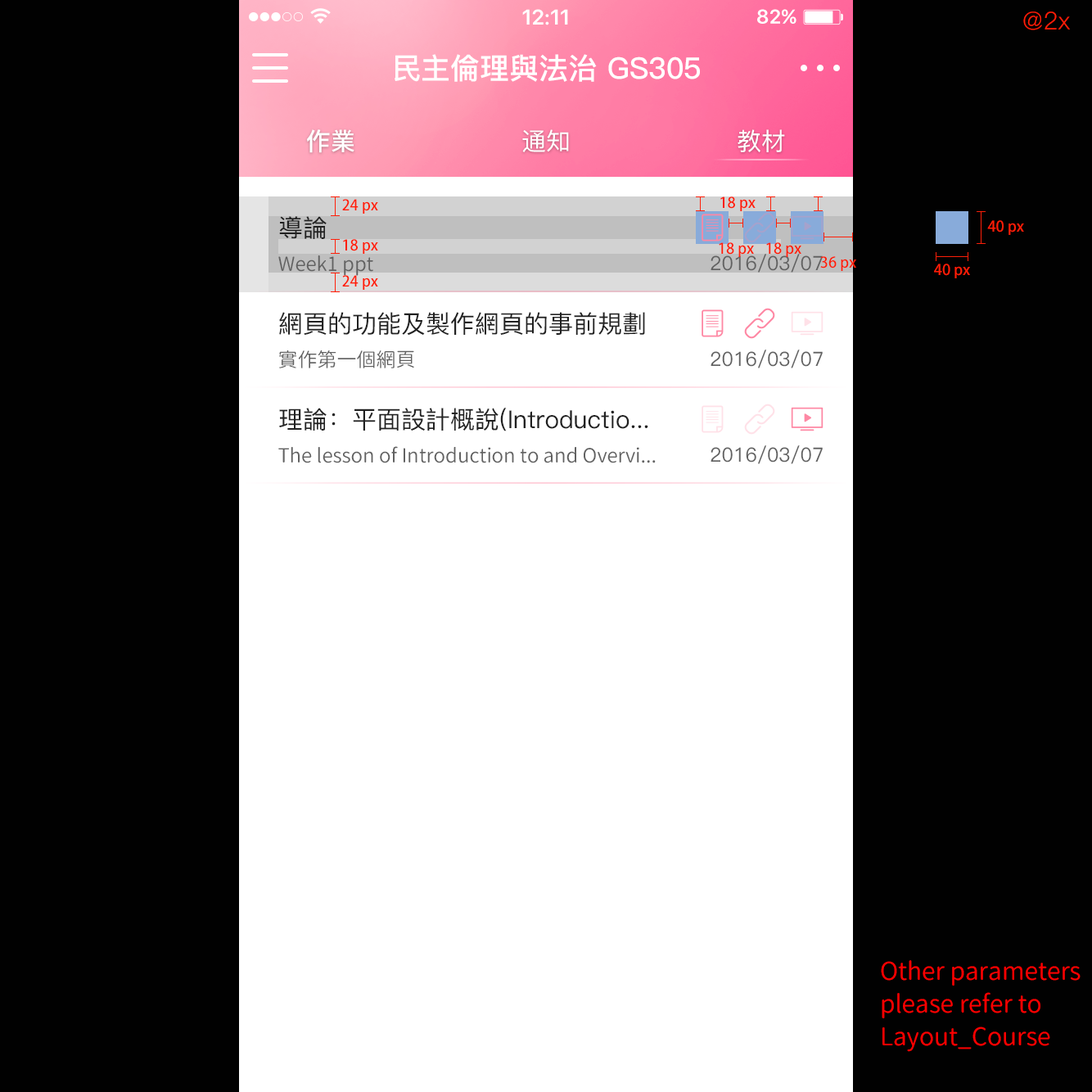
<style>
.page{position:relative;width:1092px;height:1092px;background:#010101}
.page>*{position:absolute;margin:0}
.t1{font:21.3px "SFUIDisplay-Semibold";color:#ffffff}
.t2{font:19.6px "SFUIDisplay-Semibold";letter-spacing:0.025em;color:#ffffff}
.t3{font:24.6px "PingFang-SC-Regular";color:#ff1e07}
.t4{font:29.5px "PingFang-SC-Bold";color:#ffffff}
.t5{font:24.6px "PingFang-SC-Bold";color:#ffffff}
.t6{font:24.6px "PingFang-SC-Medium";color:#ffffff}
.t7{font:14.7px "AdobeFanHeitiStd-Bold";color:#ff1e07}
.t8{font:24.6px "PingFang-SC-Medium";color:#212121}
.t9{font:19.6px "GenJyuuGothic-Normal";color:#616161}
.t10{font:19.6px "PingFang-SC-Medium";color:#616161}
.t11{font:24.6px/32.7px "GenJyuuGothic-Normal";color:#ff0000}
</style>
<div class="page">
<p class="t1" style="left:522px;top:9px;width:46px;height:16px">12:11</p>
<p class="t2" style="left:757px;top:9px;width:39px;height:15px">82%</p>
<p class="t3" style="left:1023px;top:11px;width:47px;height:19px">@2x</p>
<p class="t4" style="left:395px;top:54px;width:305px;height:28px">民主倫理與法治 GS305</p>
<p class="t5" style="left:307px;top:129px;width:47px;height:24px">作業</p>
<p class="t6" style="left:522px;top:129px;width:47px;height:23px">通知</p>
<p class="t6" style="left:738px;top:129px;width:47px;height:23px">教材</p>
<p class="t7" style="left:720px;top:196px;width:36px;height:15px">18 px</p>
<p class="t7" style="left:342px;top:199px;width:36px;height:15px">24 px</p>
<p class="t8" style="left:279px;top:216px;width:48px;height:23px">導論</p>
<p class="t7" style="left:987px;top:220px;width:37px;height:15px">40 px</p>
<p class="t7" style="left:343px;top:239px;width:35px;height:15px">18 px</p>
<p class="t7" style="left:719px;top:242px;width:35px;height:15px">18 px</p>
<p class="t7" style="left:766px;top:242px;width:35px;height:15px">18 px</p>
<p class="t9" style="left:278px;top:255px;width:95px;height:21px">Week1 ppt</p>
<p class="t10" style="left:711px;top:254px;width:112px;height:19px">2016/03/07</p>
<p class="t7" style="left:820px;top:256px;width:36px;height:15px">36 px</p>
<p class="t7" style="left:934px;top:264px;width:36px;height:14px">40 px</p>
<p class="t7" style="left:342px;top:275px;width:36px;height:15px">24 px</p>
<p class="t8" style="left:279px;top:312px;width:366px;height:24px">網頁的功能及製作網頁的事前規劃</p>
<p class="t9" style="left:279px;top:350px;width:135px;height:18px">實作第一個網頁</p>
<p class="t10" style="left:711px;top:350px;width:112px;height:18px">2016/03/07</p>
<p class="t8" style="left:279px;top:408px;width:369px;height:23px">理論：平面設計概說(Introductio...</p>
<p class="t9" style="left:278px;top:446px;width:378px;height:17px">The lesson of Introduction to and Overvi...</p>
<p class="t10" style="left:711px;top:445px;width:112px;height:19px">2016/03/07</p>
<p class="t11" style="left:881px;top:960px;width:200px;height:92px">Other parameters <br>please refer to <br>Layout_Course</p>
</div>
